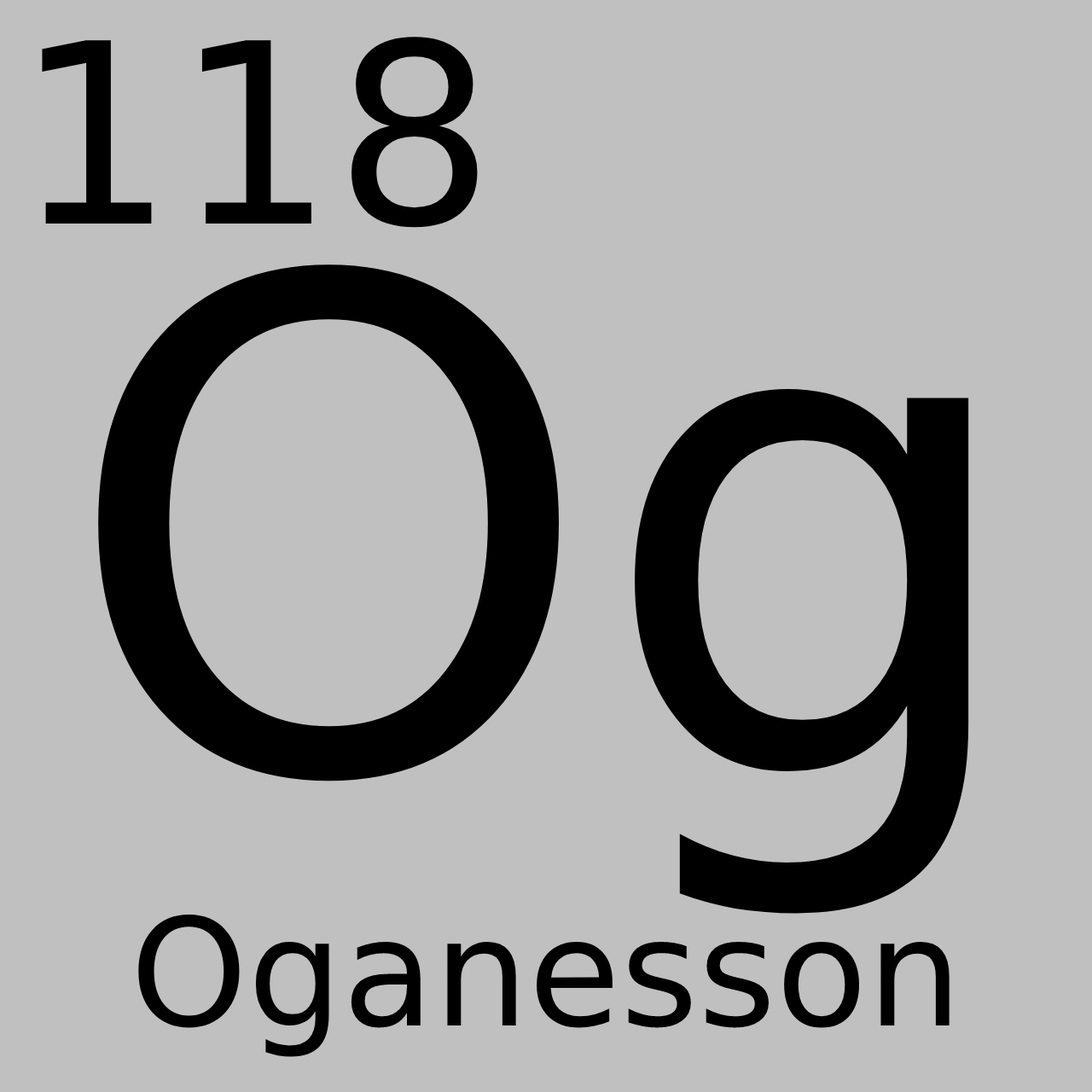
<style>
.page{position:relative;width:1092px;height:1092px;background:#c0c0c0}
.page>*{position:absolute;margin:0}
.t1{font:251.4px "DejaVuSans";color:#000000}
.t2{font:682.5px "DejaVuSans";color:#000000}
.t3{font:149.3px "DejaVuSans";color:#000000}
</style>
<div class="page">
<p class="t1" style="left:42px;top:37px;width:436px;height:191px">118</p>
<p class="t2" style="left:98px;top:264px;width:871px;height:650px">Og</p>
<p class="t3" style="left:138px;top:915px;width:812px;height:142px">Oganesson</p>
</div>
